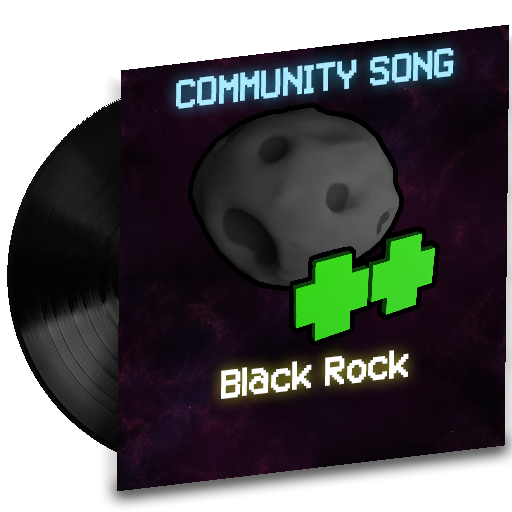
<style>
.page{position:relative;width:512px;height:512px;background:#ffffff}
.page>*{position:absolute;margin:0}
.t1{font:41.1px "VCRosdNEUE";color:#abeaff;scale:0.93 1}
.t2{font:41.1px "VCRosdNEUE";color:#ffffff;scale:0.93 1}
</style>
<div class="page">
<p class="t1" style="left:176px;top:47px;width:278px;height:62px;rotate:-7deg">COMMUNITY SONG</p>
<p class="t2" style="left:221px;top:350px;width:188px;height:49px;rotate:-7deg">Black Rock</p>
</div>
